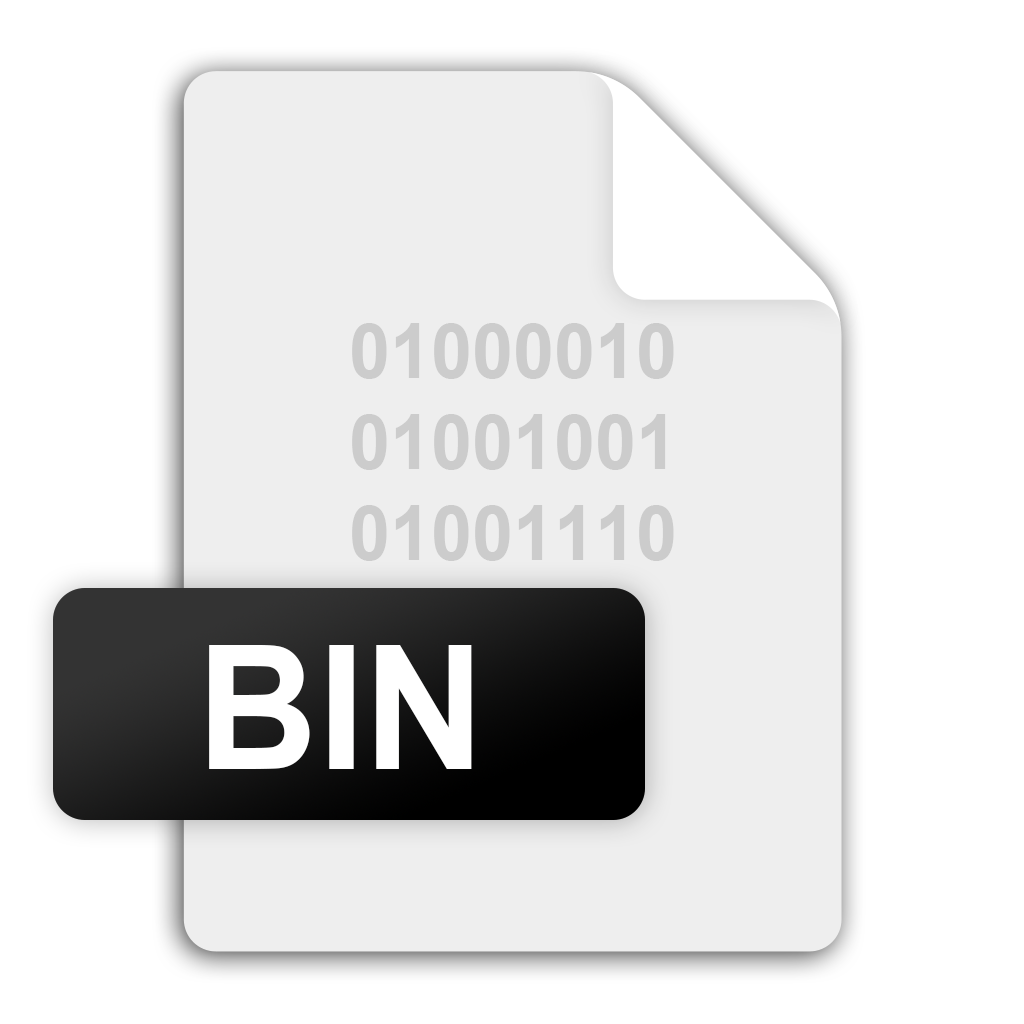
<style>
.page{position:relative;width:1024px;height:1024px;background:#ffffff}
.page>*{position:absolute;margin:0}
.t1{font:76px "Arial-BoldMT";color:#cccccc}
.t2{font:172.6px "Arial-BoldMT";color:#ffffff}
</style>
<div class="page">
<p class="t1" style="left:352px;top:323px;width:322px;height:238px;text-align:center">01000010<br>01001001<br>01001110</p>
<p class="t2" style="left:209px;top:645px;width:263px;height:124px">BIN</p>
</div>
